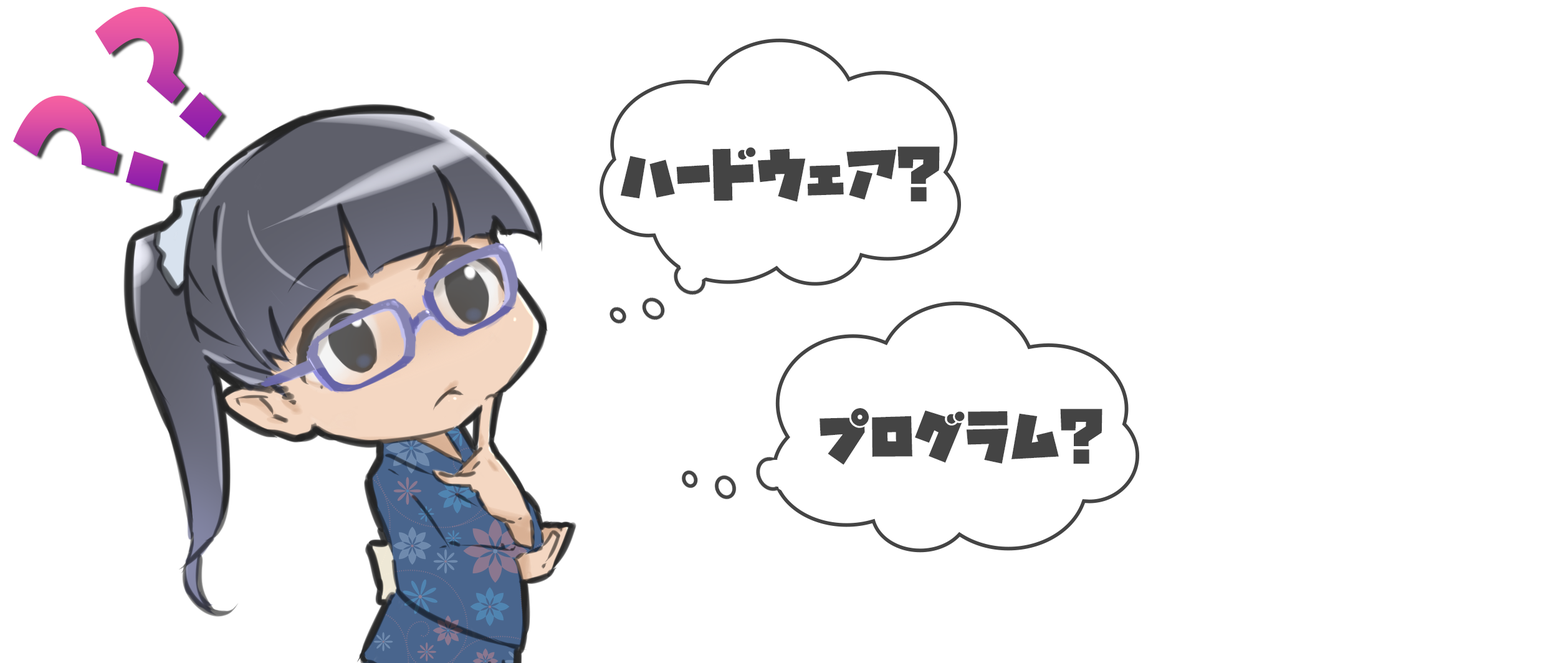
<style>
.page{position:relative;width:1568px;height:663px;background:#ffffff}
.page>*{position:absolute;margin:0}
.t1{font:201.9px "TBCGoStd-ExBold"}
.t2{font:58.6px "GN-KMBFont-UB-NewstyleKanaA";color:#444444}
</style>
<div class="page">
<p class="t1" style="left:95px;top:6px;width:127px;height:132px;rotate:-45deg">?</p>
<p class="t1" style="left:13px;top:95px;width:151px;height:96px;rotate:-71deg">?</p>
<p class="t2" style="left:620px;top:146px;width:320px;height:56px">ハードウェア?</p>
<p class="t2" style="left:820px;top:408px;width:282px;height:57px">プログラム?</p>
</div>
